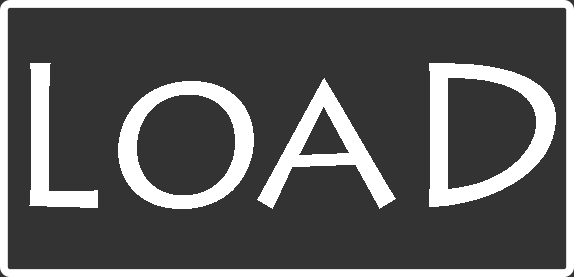
<style>
.page{position:relative;width:574px;height:277px;background:#333333}
.page>*{position:absolute;margin:0}
.t1{font:204.7px "LithosPro-Regular";color:#ffffff}
</style>
<div class="page">
<p class="t1" style="left:29px;top:63px;width:527px;height:146px">LoaD</p>
</div>
